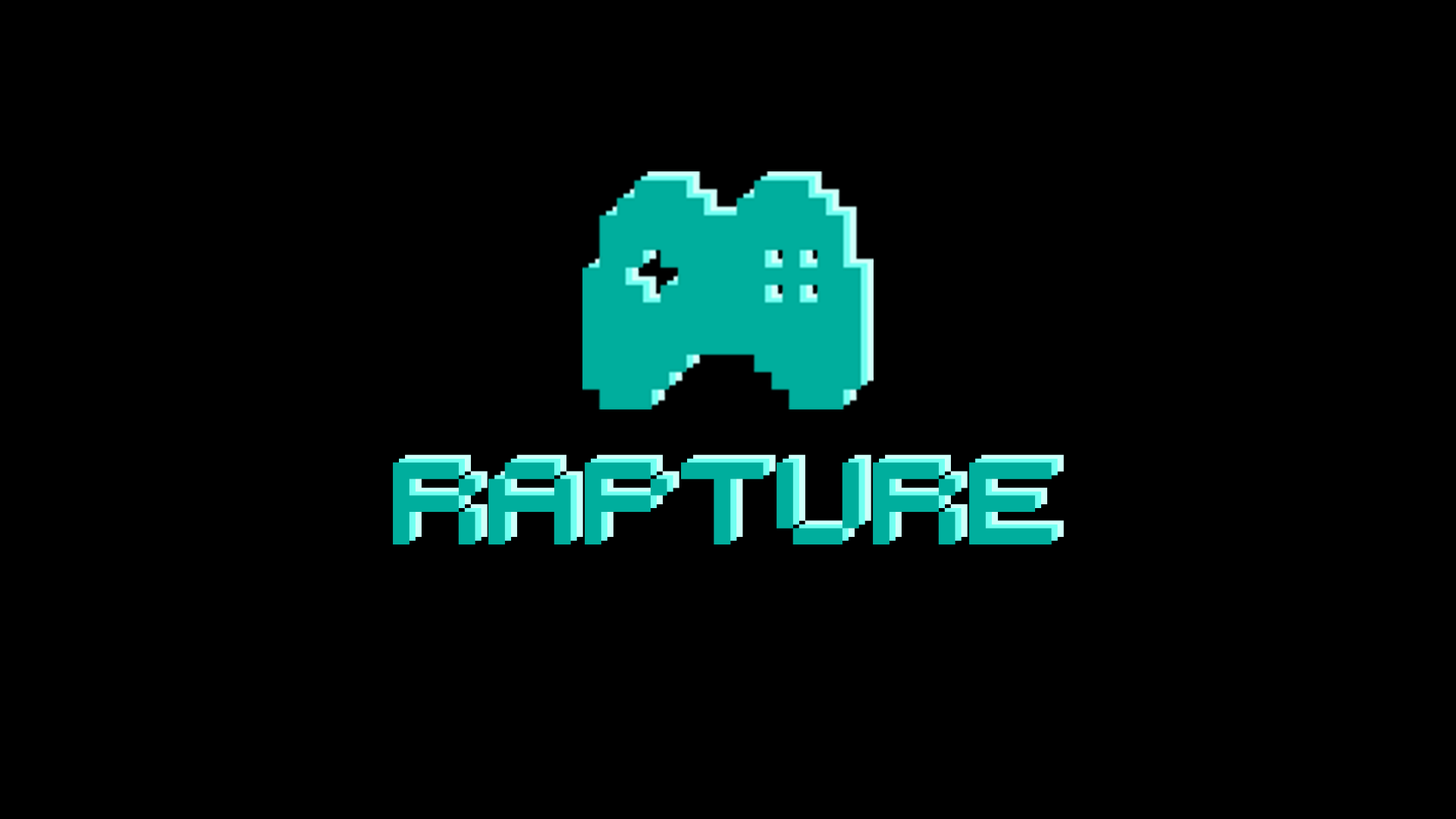
<style>
.page{position:relative;width:1456px;height:819px;background:#000000}
.page>*{position:absolute;margin:0}
.t1{font:113.7px "RetroComputer";color:#00ae9d}
.t2{font:113.7px "RetroComputer"}
</style>
<div class="page">
<p class="t1" style="left:393px;top:462px;width:659px;height:82px">RAPTURE</p>
<p class="t2" style="left:399px;top:458px;width:659px;height:83px">RAPTURE</p>
<p class="t2" style="left:405px;top:454px;width:659px;height:83px">RAPTURE</p>
</div>
